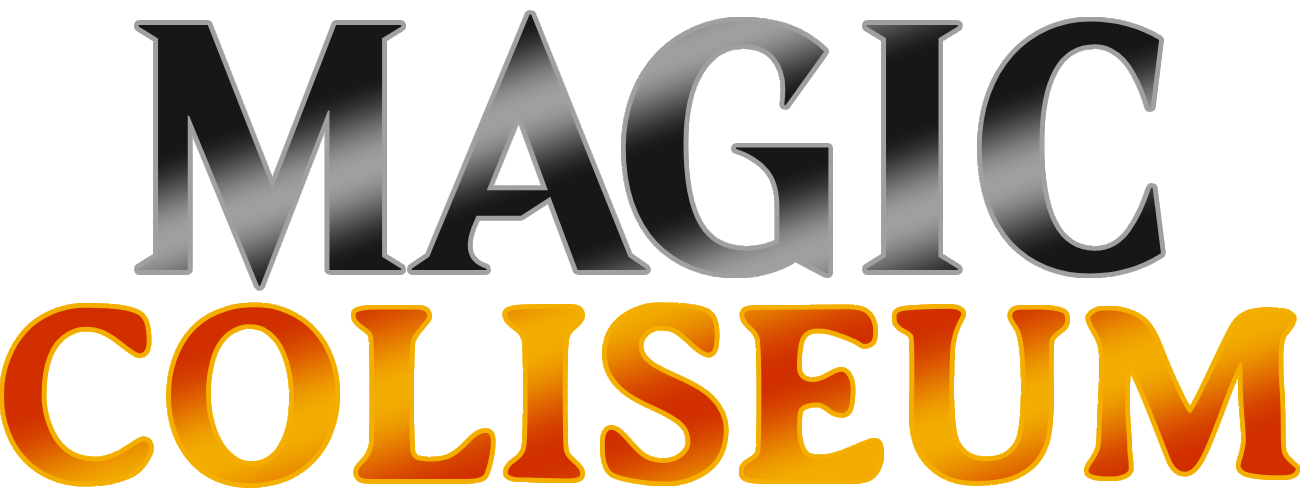
<style>
.page{position:relative;width:1300px;height:500px;background:#ffffff}
.page>*{position:absolute;margin:0}
.t1{font:350px "BelerenSmallCaps-Bold"}
.t2{font:250px "AveriaSerifLibre-Bold"}
</style>
<div class="page">
<p class="t1" style="left:138px;top:14px;width:1023px;height:272px">MAGIC</p>
<p class="t2" style="left:4px;top:307px;width:1292px;height:177px">COLISEUM</p>
</div>
